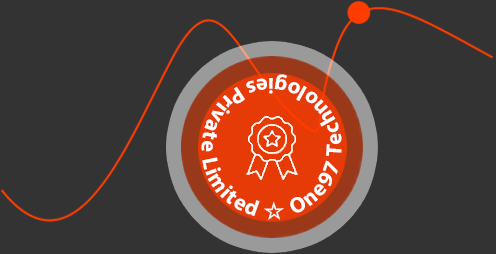
<style>
.page{position:relative;width:496px;height:254px;background:#333333}
.page>*{position:absolute;margin:0}
.t1{font:22.2px "MyriadPro-Bold";letter-spacing:0.06em;color:#ffffff}
.t2{font:22.2px "MS-PGothic";letter-spacing:0.06em;color:#ffffff}
</style>
<div class="page">
<p class="t1" style="left:201px;top:74px;width:141px;height:146px">One97 Technologies Private Limited <span class="t2">☆</span></p>
</div>
